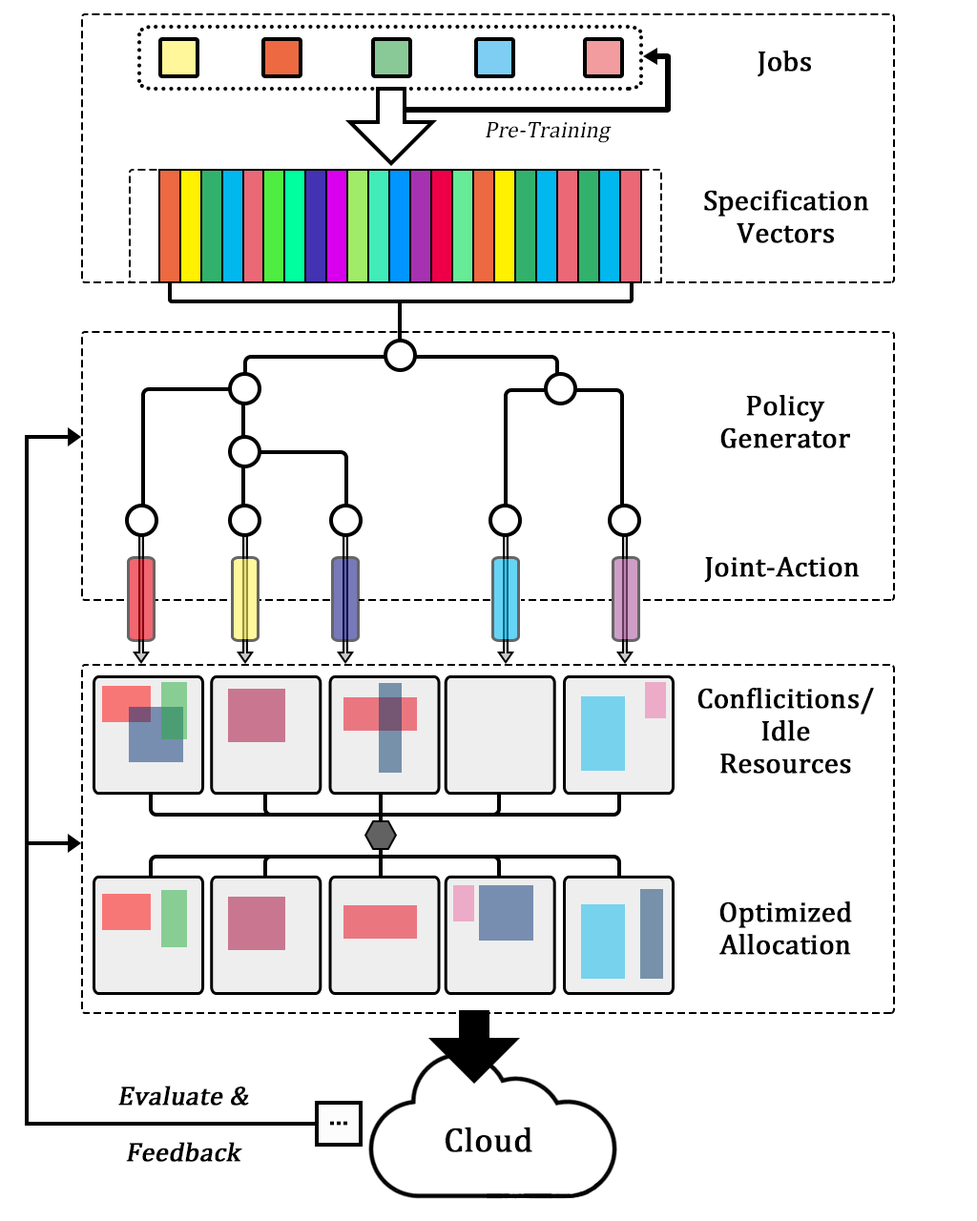
<style>
.page{position:relative;width:977px;height:1221px;background:#ffffff}
.page>*{position:absolute;margin:0}
.t1{font:28.6px "CambriaMath";color:#000000;font-weight:bold}
.t2{font:22.9px "CambriaMath";color:#000000;font-style:italic}
.t3{font:28.6px/32.4px "CambriaMath";color:#000000;font-weight:bold}
.t4{font:26.7px "CambriaMath";color:#000000;font-weight:bold;font-style:italic}
.t5{font:34.3px "CambriaMath";color:#000000;font-weight:bold}
</style>
<div class="page">
<p class="t1" style="left:757px;top:51px;width:54px;height:26px">Jobs</p>
<p class="t2" style="left:485px;top:122px;width:126px;height:21px">Pre-Training</p>
<p class="t3" style="left:704px;top:190px;width:165px;height:53px;text-align:center">Specification<br>Vectors</p>
<p class="t3" style="left:720px;top:395px;width:130px;height:53px;text-align:center">Policy<br>Generator</p>
<p class="t1" style="left:704px;top:556px;width:155px;height:27px">Joint-Action</p>
<p class="t3" style="left:697px;top:688px;width:177px;height:86px;text-align:center">Conflicitions/<br>Idle<br>Resources</p>
<p class="t3" style="left:719px;top:901px;width:133px;height:54px;text-align:center">Optimized<br>Allocation</p>
<p class="t4" style="left:118px;top:1085px;width:131px;height:20px">Evaluate &amp;</p>
<p class="t1" style="left:330px;top:1121px;width:17px;height:4px">...</p>
<p class="t5" style="left:445px;top:1126px;width:87px;height:26px">Cloud</p>
<p class="t4" style="left:126px;top:1142px;width:116px;height:20px">Feedback</p>
</div>
